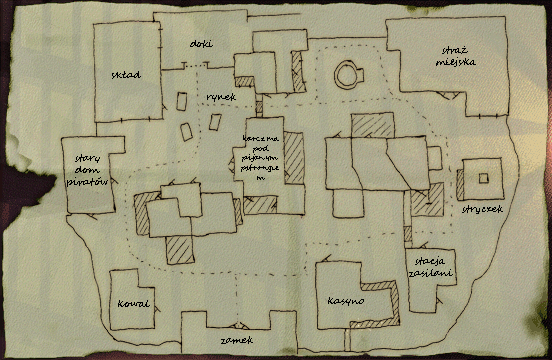
<style>
.page{position:relative;width:552px;height:360px}
.page>*{position:absolute;margin:0}
.t1{font:10px "SegoeScript";color:#000000}
.t2{font:8px "SegoeScript";color:#000000}
</style>
<div class="page">
<p class="t1" style="left:190px;top:40px;width:23px;height:8px">doki</p>
<p class="t1" style="left:436px;top:46px;width:40px;height:21px;text-align:center">straż<br>miejska</p>
<p class="t1" style="left:112px;top:71px;width:29px;height:8px">skład</p>
<p class="t1" style="left:207px;top:93px;width:29px;height:9px">rynek</p>
<p class="t2" style="left:241px;top:135px;width:38px;height:45px;text-align:center">karczma<br>pod pijanym pstrongiem</p>
<p class="t1" style="left:67px;top:154px;width:41px;height:33px;text-align:center">stary<br>dom<br>piratów</p>
<p class="t1" style="left:462px;top:205px;width:41px;height:9px">stryczek</p>
<p class="t1" style="left:409px;top:256px;width:44px;height:21px;text-align:center">stacja<br>zasilania</p>
<p class="t1" style="left:118px;top:300px;width:32px;height:7px">kowal</p>
<p class="t1" style="left:328px;top:297px;width:36px;height:9px">kasyno</p>
<p class="t1" style="left:221px;top:336px;width:32px;height:8px">zamek</p>
</div>
